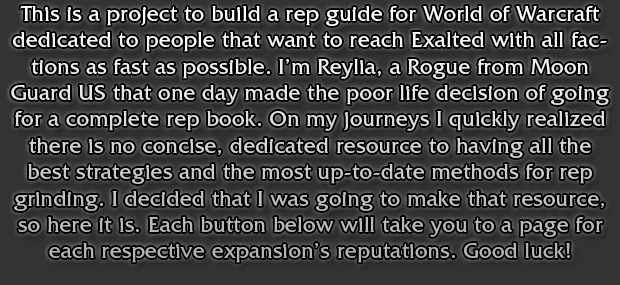
<style>
.page{position:relative;width:620px;height:285px}
.page>*{position:absolute;margin:0}
.t1{font:22px "FrizQuadrataStd";letter-spacing:0.025em}
</style>
<div class="page">
<p class="t1" style="left:11px;top:5px;width:598px;height:258px;text-align:center">This is a project to build a rep guide for World of Warcraft dedicated to people that want to reach Exalted with all factions as fast as possible. I’m Reylia, a Rogue from Moon Guard US that one day made the poor life decision of going for a complete rep book. On my journeys I quickly realized there is no concise, dedicated resource to having all the best strategies and the most up-to-date methods for rep grinding. I decided that I was going to make that resource, so here it is. Each button below will take you to a page for <br>each respective expansion’s reputations. Good luck!</p>
</div>
